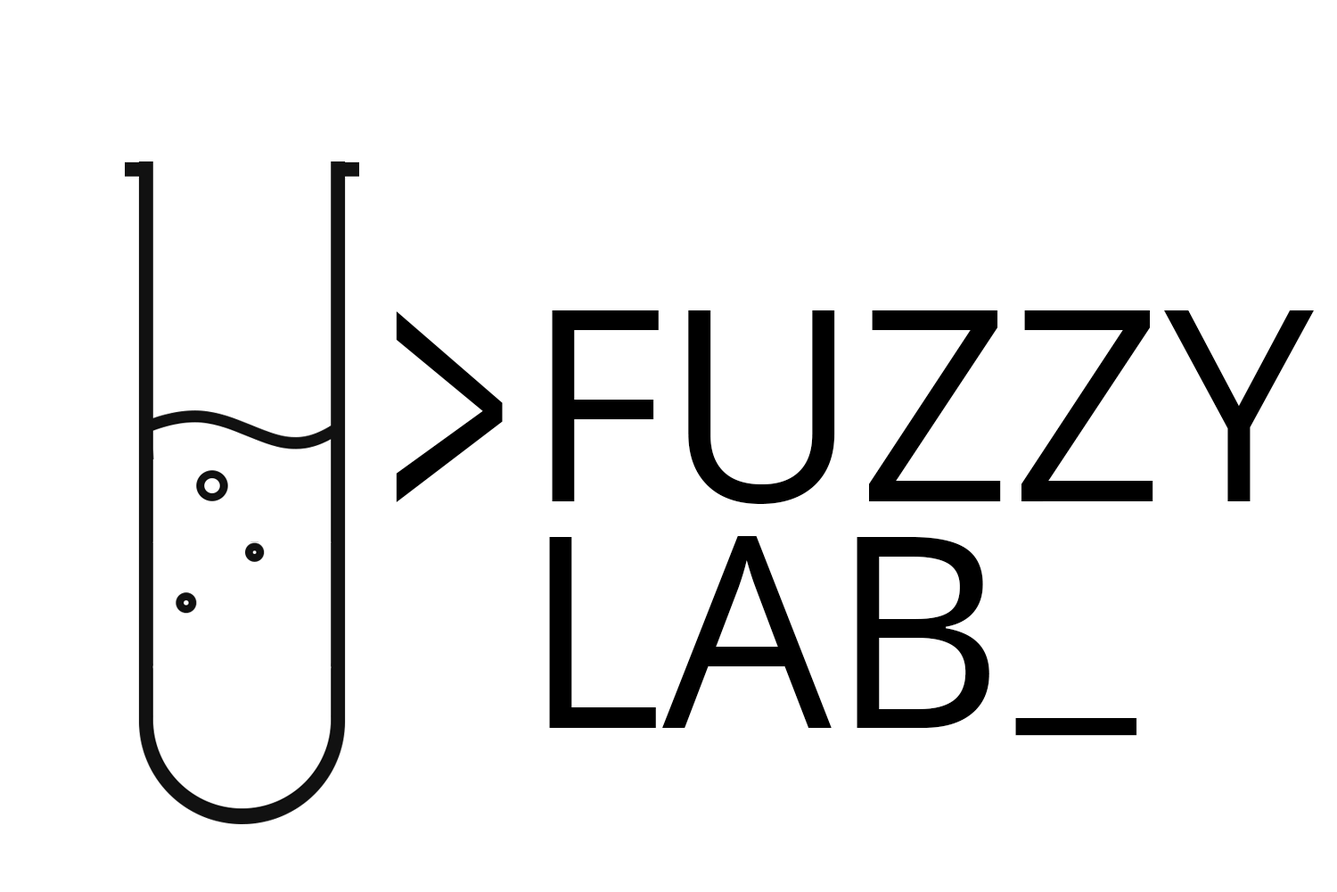
<style>
.page{position:relative;width:1337px;height:892px;background:#ffffff}
.page>*{position:absolute;margin:0}
.t1{font:391.4px "OpenSans-Regular";color:#000000;scale:0.58 1}
.t2{font:267.5px "OpenSans-Regular";color:#000000}
</style>
<div class="page">
<p class="t1" style="left:396px;top:311px;width:107px;height:191px">&gt;</p>
<p class="t2" style="left:552px;top:310px;width:763px;height:194px">FUZZY</p>
<p class="t2" style="left:549px;top:536px;width:441px;height:192px">LAB</p>
<p class="t2" style="left:1016px;top:718px;width:122px;height:18px">_</p>
</div>
